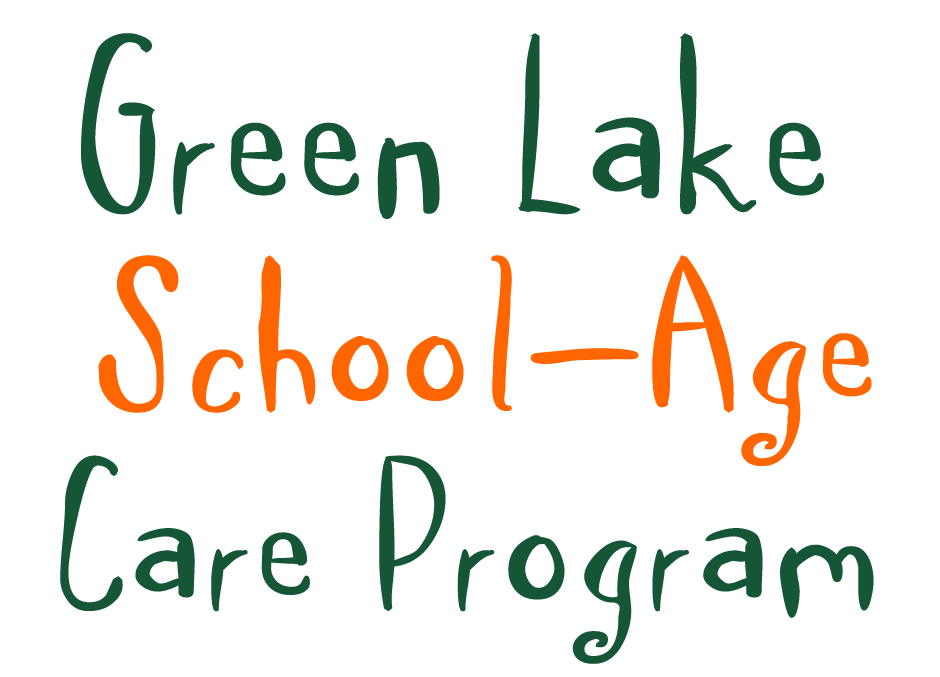
<style>
.page{position:relative;width:940px;height:677px;background:#ffffff}
.page>*{position:absolute;margin:0}
.t1{font:231.9px "SpillMilk";color:#145636;scale:1.4 1}
.t2{font:201.4px "SpillMilk";color:#ff6501;scale:1.43 1}
.t3{font:199.1px "SpillMilk";color:#145636;scale:1.43 1}
</style>
<div class="page">
<p class="t1" style="left:81px;top:33px;width:743px;height:186px">Green Lake</p>
<p class="t2" style="left:98px;top:255px;width:774px;height:211px">School-Age</p>
<p class="t3" style="left:60px;top:455px;width:814px;height:209px">Care Program</p>
</div>
